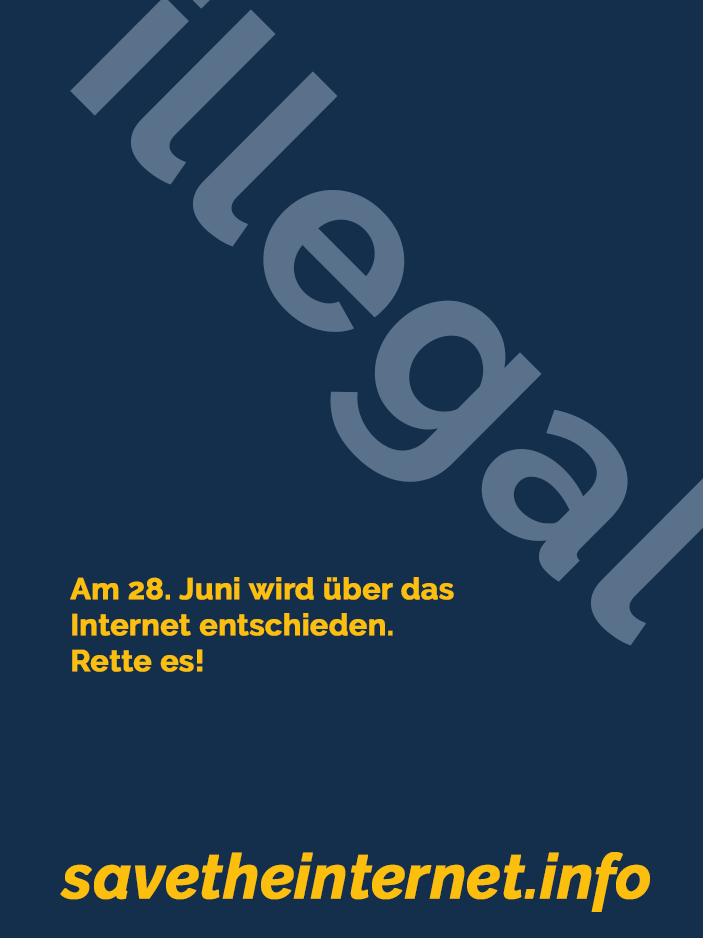
<style>
.page{position:relative;width:703px;height:938px;background:#142f4c}
.page>*{position:absolute;margin:0}
.t1{font:30px "Raleway-Bold";color:#fcbf0e;font-weight:bold}
.t2{font:62.3px "Raleway-BoldItalic";color:#fcbf0e;font-weight:bold;scale:0.96 1}
</style>
<div class="page">
<p class="t1" style="left:70px;top:577px;width:384px;height:95px">Am 28. Juni wird über das <br>Internet entschieden.<br>Rette es!</p>
<p class="t2" style="left:60px;top:852px;width:590px;height:60px">savetheinternet.info</p>
</div>
